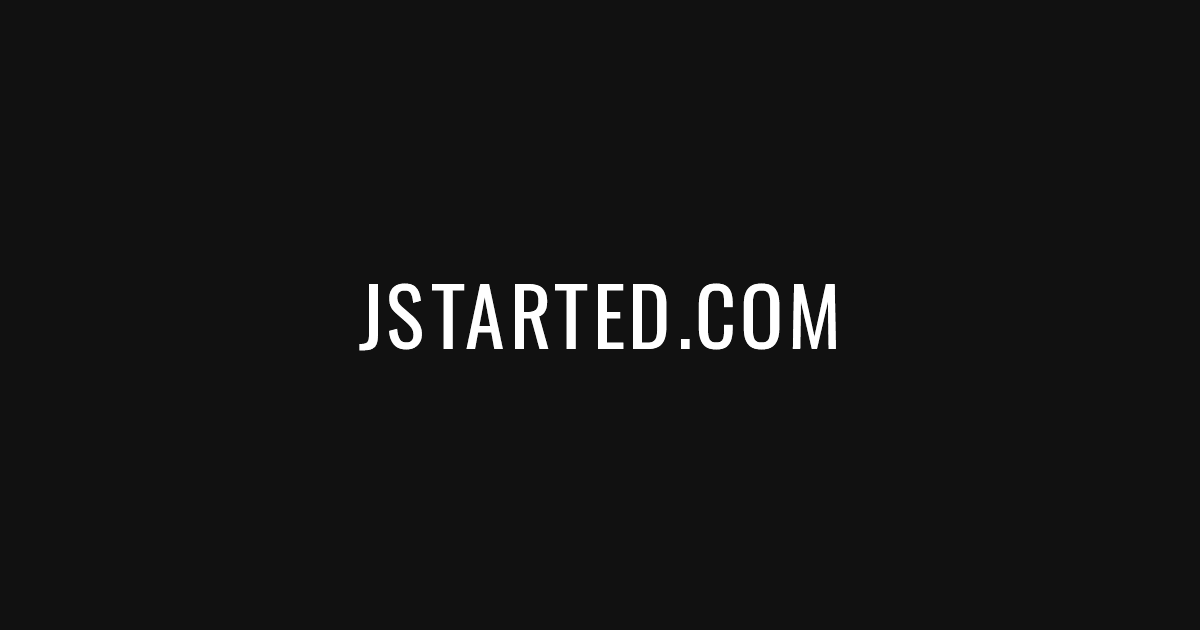
<style>
.page{position:relative;width:1200px;height:630px;background:#111111}
.page>*{position:absolute;margin:0}
.t1{font:80px "Oswald-Regular";letter-spacing:0.06em;color:#ffffff}
</style>
<div class="page">
<p class="t1" style="left:359px;top:283px;width:477px;height:68px">JSTARTED.COM</p>
</div>
